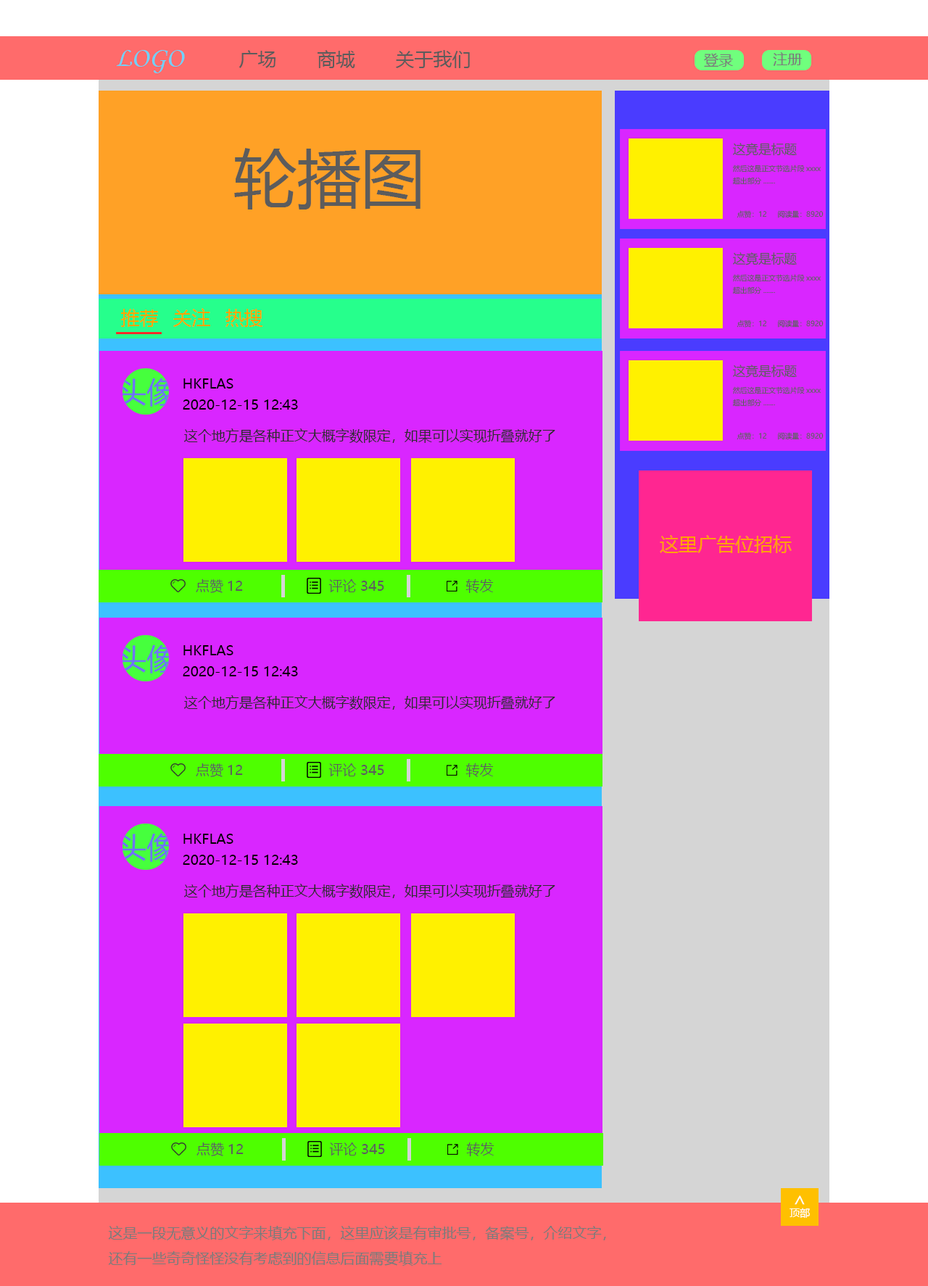
<style>
.page{position:relative;width:928px;height:1286px;background:#ffffff}
.page>*{position:absolute;margin:0}
.t1{font:18.8px "MicrosoftYaHei";color:#5c5c5c}
.t2{font:63.8px "MicrosoftYaHei";color:#5c5c5c}
.t3{font:7.2px "MicrosoftYaHei";color:#5c5c5c}
.t4{font:12.9px "MicrosoftYaHei";color:#5c5c5c}
.t5{font:18.8px "MicrosoftYaHei";color:#ffa200}
.t6{font:13.8px "MicrosoftYaHei";color:#010101}
.t7{font:13.8px "MicrosoftYaHei";color:#000000}
.t8{font:13.8px "MicrosoftYaHei";color:#2c2c2c}
.t9{font:13.8px "MicrosoftYaHei";color:#5c5c5c}
.t10{font:18.9px "MicrosoftYaHei";color:#ffffff}
.t11{font:10.1px "MicrosoftYaHei";color:#ffffff}
</style>
<div class="page">
<p class="t1" style="left:238px;top:50px;width:232px;height:18px">广场  商城  关于我们</p>
<p class="t2" style="left:234px;top:148px;width:186px;height:61px">轮播图</p>
<p class="t3" style="left:732px;top:143px;width:88px;height:42px"><span class="t4">这竟是标题<br></span>然后这是正文节选片段xxxx<br>超出部分.......</p>
<p class="t3" style="left:736px;top:210px;width:87px;height:8px">点赞：12 阅读量：8920</p>
<p class="t3" style="left:732px;top:252px;width:88px;height:42px"><span class="t4">这竟是标题<br></span>然后这是正文节选片段xxxx<br>超出部分.......</p>
<p class="t5" style="left:120px;top:308px;width:143px;height:19px">推荐 关注 热搜</p>
<p class="t3" style="left:736px;top:320px;width:87px;height:8px">点赞：12 阅读量：8920</p>
<p class="t3" style="left:732px;top:365px;width:88px;height:42px"><span class="t4">这竟是标题<br></span>然后这是正文节选片段xxxx<br>超出部分.......</p>
<p class="t6" style="left:183px;top:378px;width:50px;height:10px">HKFLAS</p>
<p class="t7" style="left:183px;top:399px;width:115px;height:10px">2020-12-15 12:43</p>
<p class="t8" style="left:184px;top:428px;width:371px;height:15px">这个地方是各种正文大概字数限定，如果可以实现折叠就好了</p>
<p class="t3" style="left:736px;top:432px;width:87px;height:8px">点赞：12 阅读量：8920</p>
<p class="t5" style="left:659px;top:535px;width:132px;height:18px">这里广告位招标</p>
<p class="t9" style="left:196px;top:579px;width:297px;height:14px">点赞12          评论 345                转发</p>
<p class="t6" style="left:183px;top:645px;width:50px;height:10px">HKFLAS</p>
<p class="t7" style="left:183px;top:666px;width:115px;height:10px">2020-12-15 12:43</p>
<p class="t8" style="left:184px;top:695px;width:371px;height:14px">这个地方是各种正文大概字数限定，如果可以实现折叠就好了</p>
<p class="t9" style="left:196px;top:763px;width:297px;height:14px">点赞12          评论 345                转发</p>
<p class="t6" style="left:183px;top:833px;width:50px;height:11px">HKFLAS</p>
<p class="t7" style="left:183px;top:854px;width:115px;height:11px">2020-12-15 12:43</p>
<p class="t8" style="left:184px;top:883px;width:371px;height:15px">这个地方是各种正文大概字数限定，如果可以实现折叠就好了</p>
<p class="t9" style="left:196px;top:1142px;width:298px;height:14px">点赞12          评论 345                转发</p>
<p class="t10" style="left:794px;top:1195px;width:10px;height:9px;rotate:-90deg">&gt;</p>
<p class="t11" style="left:789px;top:1207px;width:20px;height:10px">顶部</p>
</div>
